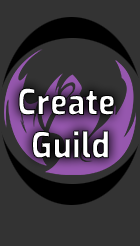
<style>
.page{position:relative;width:140px;height:246px;background:#333333}
.page>*{position:absolute;margin:0}
.t1{font:36px "ExoRoman-ExtraBold";scale:0.9 1}
</style>
<div class="page">
<p class="t1" style="left:18px;top:87px;width:97px;height:72px;text-align:center">Create <br>Guild</p>
</div>
